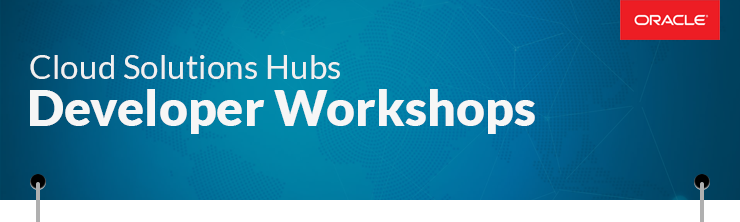
<style>
.page{position:relative;width:740px;height:222px}
.page>*{position:absolute;margin:0}
.t1{font:33.3px "Lato-Regular";color:#f0f0f0}
.t2{font:50px "Lato-Black";color:#f6f6f6}
</style>
<div class="page">
<p class="t1" style="left:30px;top:55px;width:310px;height:24px">Cloud Solutions Hubs</p>
<p class="t2" style="left:30px;top:89px;width:505px;height:45px">Developer Workshops</p>
</div>
